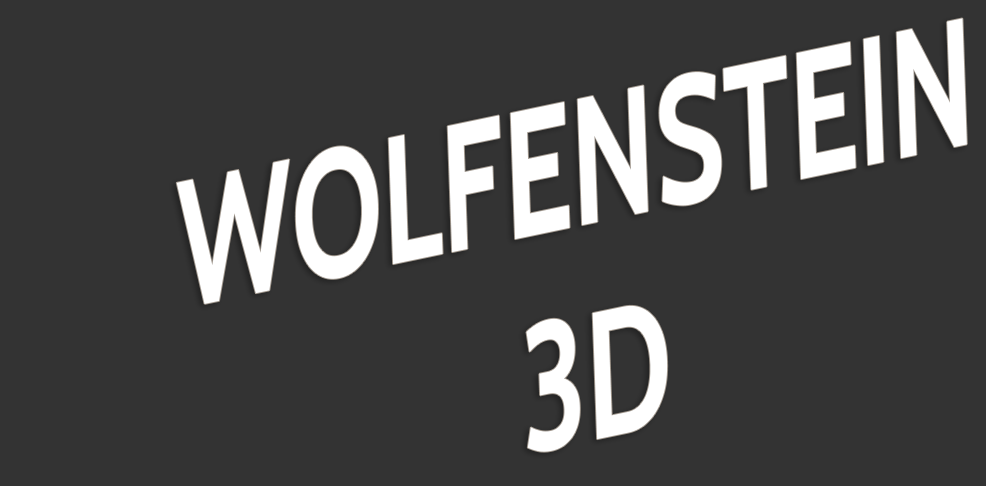
<style>
.page{position:relative;width:986px;height:486px;background:#333333}
.page>*{position:absolute;margin:0}
.t1{font:180px "Cabin-Bold";color:#ffffff;scale:0.67 1}
</style>
<div class="page">
<p class="t1" style="left:176px;top:18px;width:791px;height:434px;text-align:center;rotate:-12deg">WOLFENSTEIN <br>3D</p>
</div>
